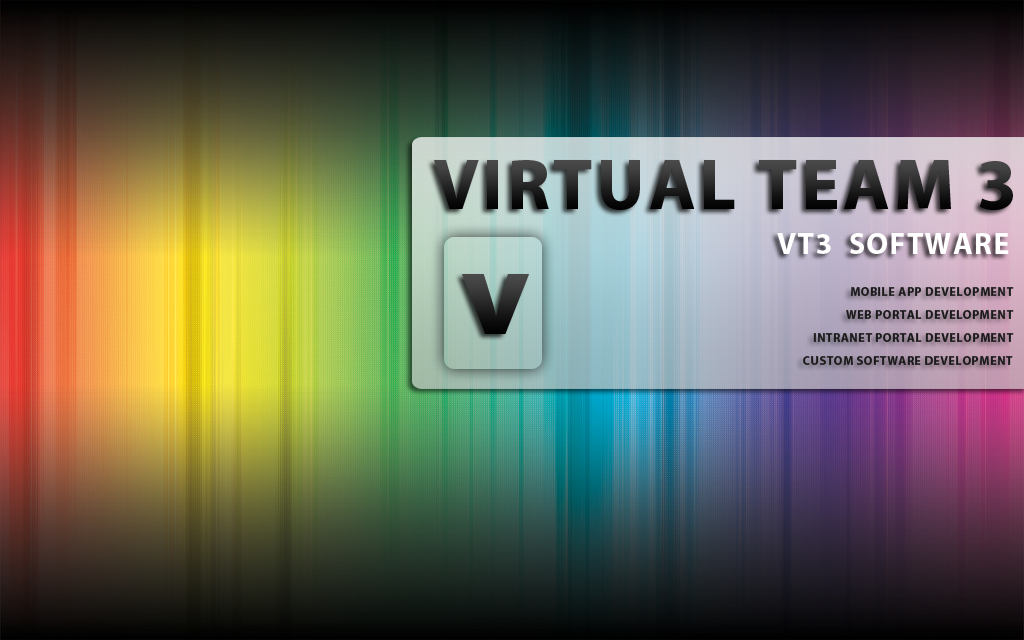
<style>
.page{position:relative;width:1024px;height:640px}
.page>*{position:absolute;margin:0}
.t1{font:72px "MyriadPro-Bold";letter-spacing:0.05em}
.t2{font:30px "MyriadPro-Bold";letter-spacing:0.05em;color:#ffffff}
.t3{font:123.5px "MyriadPro-Bold";letter-spacing:0.05em;scale:1.06 1}
.t4{font:12px "MyriadPro-Bold";letter-spacing:0.05em;color:#1b1b1b}
</style>
<div class="page">
<p class="t1" style="left:434px;top:160px;width:579px;height:50px">VIRTUAL TEAM 3</p>
<p class="t2" style="left:777px;top:233px;width:232px;height:21px">VT3  SOFTWARE</p>
<p class="t3" style="left:462px;top:274px;width:67px;height:60px">v</p>
<p class="t4" style="left:850px;top:287px;width:164px;height:9px">MOBILE APP DEVELOPMENT</p>
<p class="t4" style="left:846px;top:310px;width:168px;height:9px">WEB PORTAL DEVELOPMENT</p>
<p class="t4" style="left:813px;top:333px;width:201px;height:9px">INTRANET PORTAL DEVELOPMENT</p>
<p class="t4" style="left:803px;top:356px;width:210px;height:9px">CUSTOM SOFTWARE DEVELOPMENT</p>
</div>
